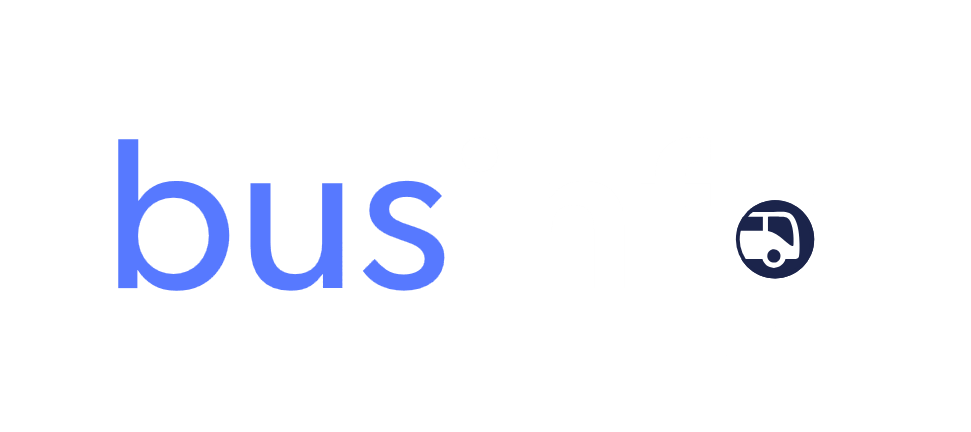
<style>
.page{position:relative;width:971px;height:432px;background:#ffffff}
.page>*{position:absolute;margin:0}
.t1{font:212px "FuturaTodayScreen-Normal";color:#5779ff}
.t2{font:212px "FuturaTodayScreen-DemiBold";color:#ffffff}
</style>
<div class="page">
<p class="t1" style="left:118px;top:136px;width:593px;height:155px">bus<span class="t2">inf</span></p>
</div>
